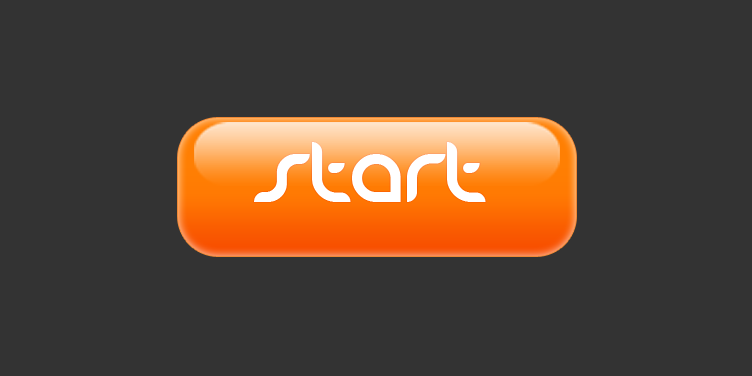
<style>
.page{position:relative;width:752px;height:376px;background:#333333}
.page>*{position:absolute;margin:0}
.t1{font:60px "Danube";color:#ffffff}
</style>
<div class="page">
<p class="t1" style="left:254px;top:142px;width:232px;height:60px">start</p>
</div>
